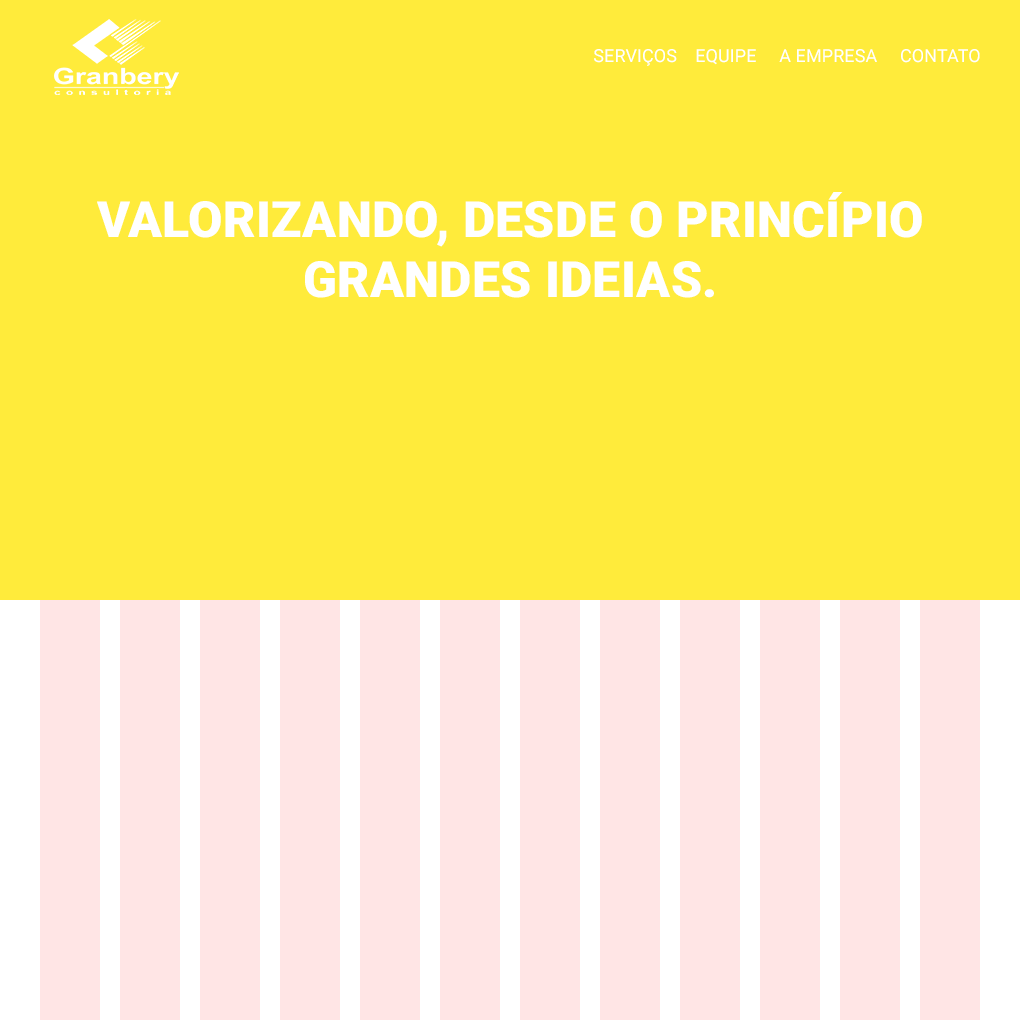
<style>
.page{position:relative;width:1020px;height:1020px;background:#ffeb3b}
.page>*{position:absolute;margin:0}
.t1{font:18px "Roboto-Regular";letter-spacing:0.005em;color:#ffffff}
.t2{font:50px/60px "Roboto-Black";letter-spacing:0.005em;color:#ffffff}
</style>
<div class="page">
<p class="t1" style="left:594px;top:49px;width:386px;height:17px">SERVIÇOS    EQUIPE     A EMPRESA     CONTATO</p>
<p class="t2" style="left:97px;top:192px;width:825px;height:106px;text-align:center">VALORIZANDO, DESDE O PRINCÍPIO<br>GRANDES IDEIAS.</p>
</div>
